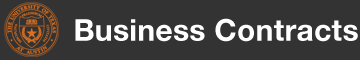
<style>
.page{position:relative;width:360px;height:60px;background:#333333}
.page>*{position:absolute;margin:0}
.t1{font:30px "HelveticaNeue-Bold";letter-spacing:0.01em;color:#ffffff}
</style>
<div class="page">
<p class="t1" style="left:75px;top:18px;width:283px;height:24px">Business Contracts</p>
</div>
